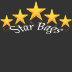
<style>
.page{position:relative;width:72px;height:72px;background:#333333}
.page>*{position:absolute;margin:0}
.t1{font:8.3px "BookAntiqua-Italic";color:#ffffff;scale:1.29 1}
</style>
<div class="page">
<p class="t1" style="left:9px;top:22px;width:55px;height:12px">Star Bags</p>
</div>
